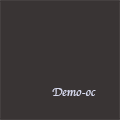
<style>
.page{position:relative;width:120px;height:120px;background:#393434}
.page>*{position:absolute;margin:0}
.t1{font:12px "Apple-Chancery";color:#d5d7eb}
</style>
<div class="page">
<p class="t1" style="left:52px;top:88px;width:44px;height:8px">Demo-oc</p>
</div>
